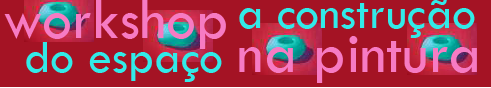
<style>
.page{position:relative;width:491px;height:88px;background:#a41324}
.page>*{position:absolute;margin:0}
.t1{font:60px "TwCenMT-Regular";color:#f67bc3}
.t2{font:48px "TwCenMT-Regular";color:#32eae8}
</style>
<div class="page">
<p class="t1" style="left:4px;top:0px;width:222px;height:49px">workshop</p>
<p class="t2" style="left:239px;top:0px;width:236px;height:38px">a construção</p>
<p class="t1" style="left:239px;top:36px;width:238px;height:47px">na pintura</p>
<p class="t2" style="left:26px;top:42px;width:196px;height:40px">do espaço</p>
</div>
